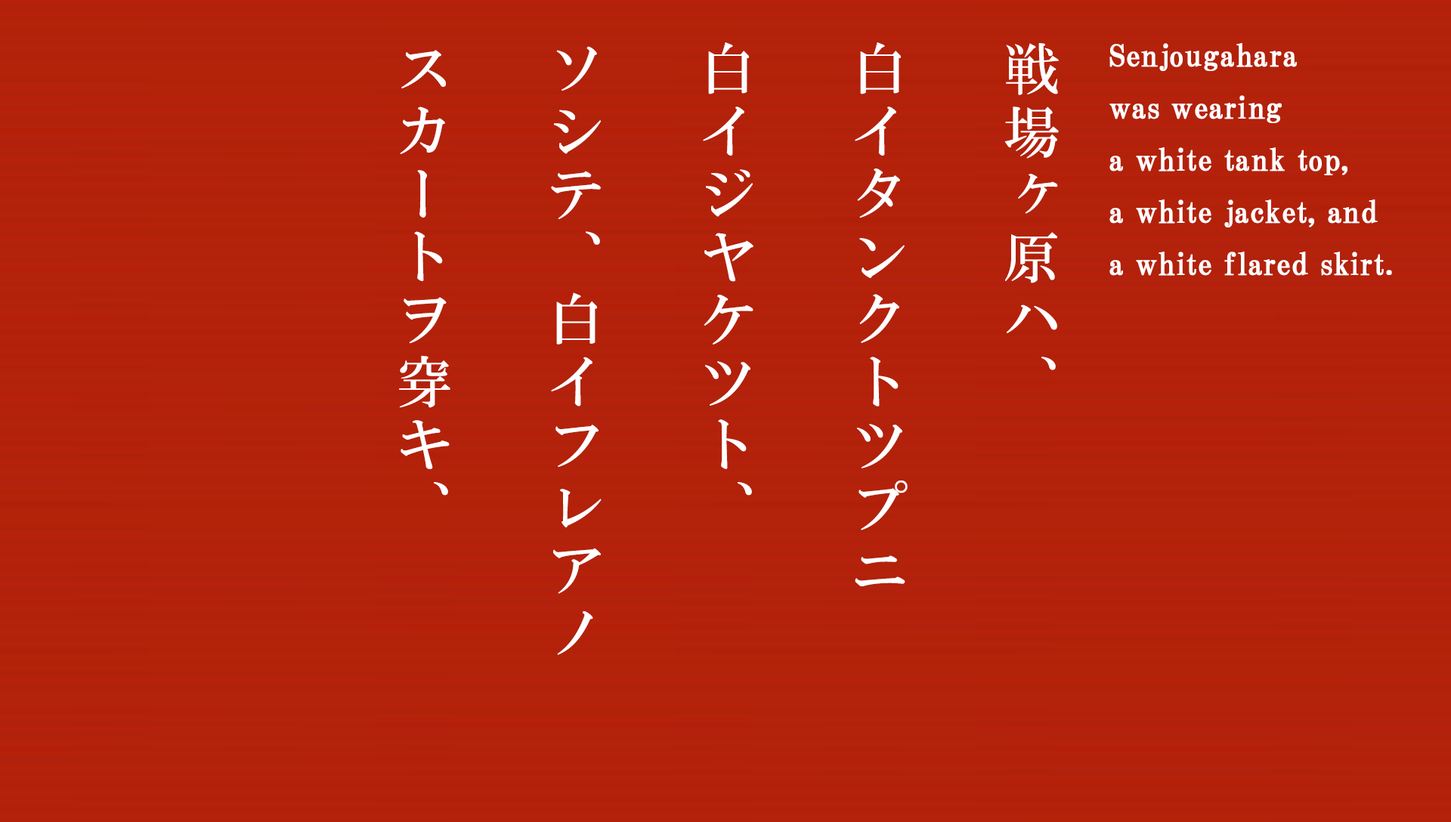
<style>
.page{position:relative;width:1451px;height:822px}
.page>*{position:absolute;margin:0}
.t1{font:55.9px/151.9px "HGMinchoB";letter-spacing:0.12em;color:#feffff}
.t2{font:30.2px/52.1px "HGPMinchoB";letter-spacing:0.01em;color:#ffffff;font-weight:bold}
</style>
<div class="page">
<p class="t1" style="left:399px;top:42px;width:659px;height:613px">戦場ヶ原ハ、<br>白イタンクトツプニ<br>白イジヤケツト、<br>ソシテ、白イフレアノ<br>スカートヲ穿キ、</p>
<p class="t2" style="left:1109px;top:43px;width:283px;height:233px">Senjougahara<br>was wearing<br>a white tank top,<br>a white jacket, and<br>a white flared skirt.</p>
</div>
